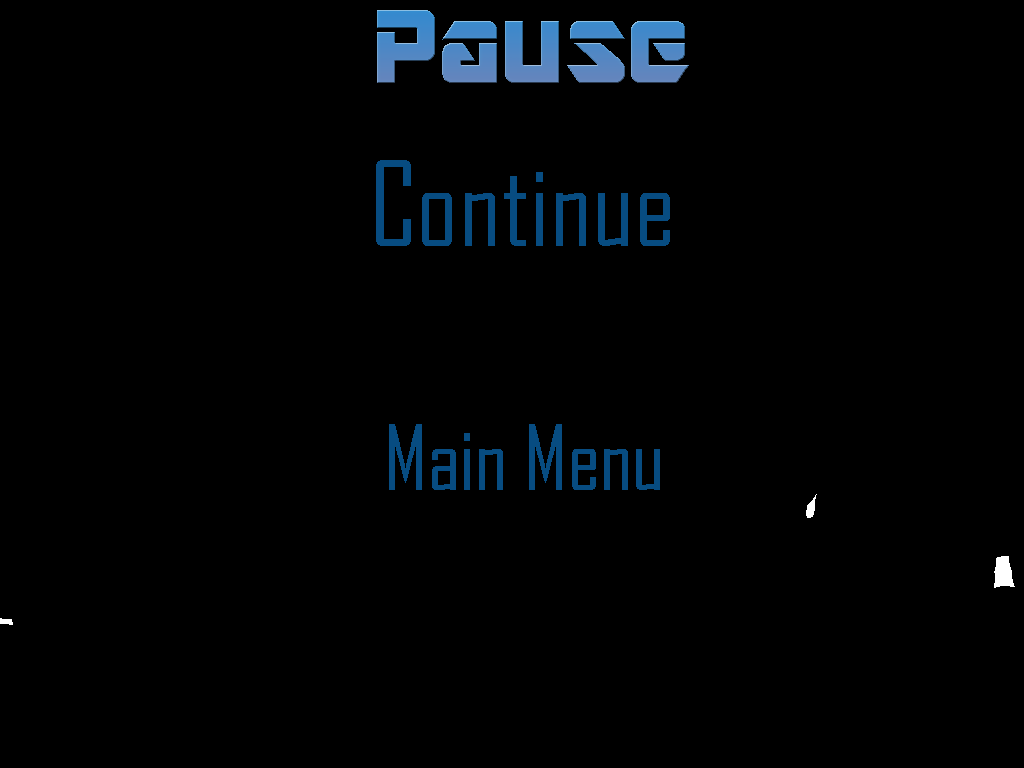
<style>
.page{position:relative;width:1024px;height:768px;background:#000000}
.page>*{position:absolute;margin:0}
.t1{font:115.9px "ARDESTINE";color:#4f88c5}
.t2{font:112px "AgencyFB-Reg";color:#074c81}
.t3{font:86px "AgencyFB-Reg";color:#074c81}
</style>
<div class="page">
<p class="t1" style="left:377px;top:10px;width:312px;height:73px">Pause</p>
<p class="t1" style="left:377px;top:10px;width:312px;height:73px">Pause</p>
<p class="t1" style="left:377px;top:10px;width:312px;height:73px">Pause</p>
<p class="t2" style="left:376px;top:160px;width:294px;height:86px">Continue</p>
<p class="t3" style="left:389px;top:424px;width:271px;height:66px">Main Menu</p>
</div>
